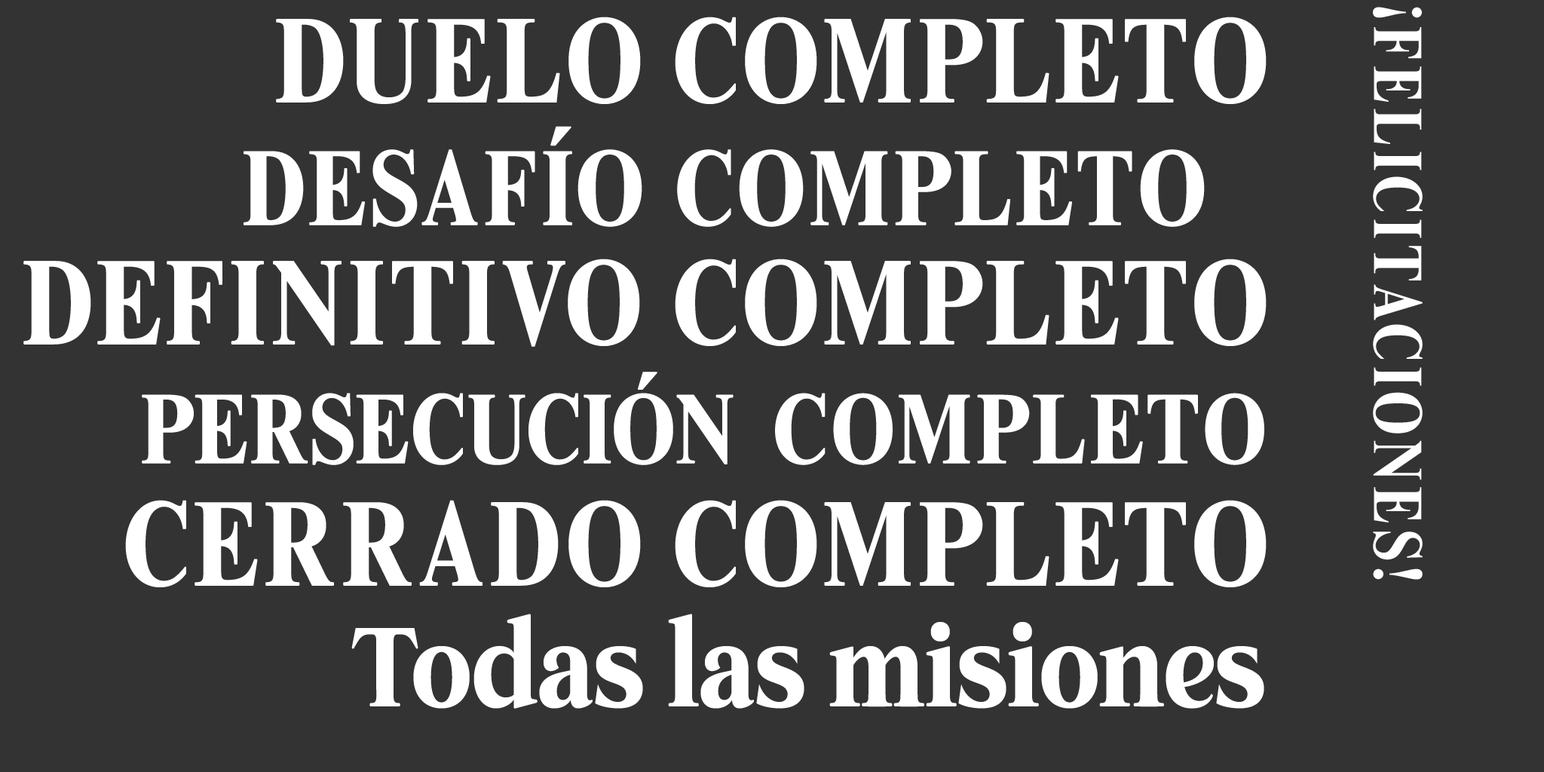
<style>
.page{position:relative;width:1544px;height:772px;background:#333333}
.page>*{position:absolute;margin:0}
.t1{font:120.5px "TimesNewRomanMTStd-BoldCond";letter-spacing:0.02em;color:#ffffff;text-transform:uppercase;font-weight:bold}
.t2{font:69.3px "TimesNewRomanMTStd-BoldCond";color:#ffffff;text-transform:uppercase}
.t3{font:69.3px "TimesNewRomanMTStd-BoldCond";letter-spacing:0.08em;color:#ffffff;text-transform:uppercase}
.t4{font:107.1px "TimesNewRomanMTStd-BoldCond";letter-spacing:0.02em;color:#ffffff;text-transform:uppercase;font-weight:bold}
.t5{font:99.3px "TimesNewRomanMTStd-BoldCond";color:#ffffff;text-transform:uppercase;font-weight:bold}
.t6{font:99.3px "TimesNewRomanMTStd-BoldCond";letter-spacing:0.02em;color:#ffffff;text-transform:uppercase;font-weight:bold}
.t7{font:121.7px "TheKalliagi-Regular";color:#ffffff;scale:0.94 1}
</style>
<div class="page">
<p class="t1" style="left:276px;top:17px;width:365px;height:87px">Duelo</p>
<p class="t1" style="left:675px;top:17px;width:592px;height:87px">completo</p>
<p class="t2" style="left:1373px;top:7px;width:49px;height:11px;rotate:90deg">¡</p>
<p class="t3" style="left:1373px;top:27px;width:50px;height:553px;rotate:90deg">felicitaciones!</p>
<p class="t4" style="left:244px;top:126px;width:398px;height:101px">desafío</p>
<p class="t4" style="left:677px;top:149px;width:528px;height:78px">completo</p>
<p class="t1" style="left:23px;top:259px;width:617px;height:88px">definitivo</p>
<p class="t1" style="left:675px;top:259px;width:592px;height:87px">completo</p>
<p class="t5" style="left:142px;top:372px;width:592px;height:93px">PERSECUCIÓN</p>
<p class="t6" style="left:775px;top:393px;width:490px;height:72px">completo</p>
<p class="t1" style="left:125px;top:500px;width:516px;height:87px">cerrado</p>
<p class="t1" style="left:675px;top:500px;width:592px;height:87px">completo</p>
<p class="t7" style="left:351px;top:614px;width:914px;height:95px">Todas las misiones</p>
</div>
